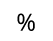
<style>
.page{position:relative;width:53px;height:41px;background:#ffffff}
.page>*{position:absolute;margin:0}
.t1{font:23.7px "DroidSans";color:#000000}
</style>
<div class="page">
<p class="t1" style="left:17px;top:13px;width:18px;height:18px">%</p>
</div>
